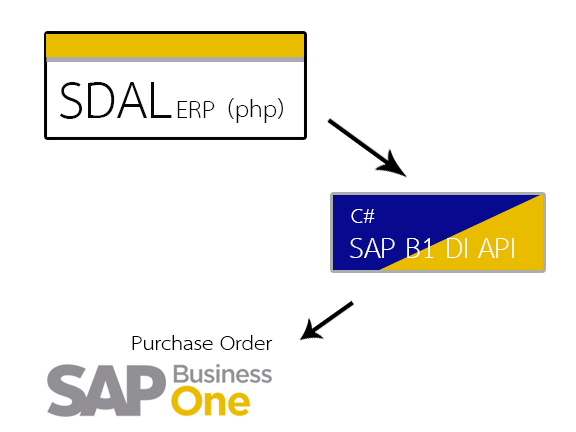
<style>
.page{position:relative;width:576px;height:432px;background:#ffffff}
.page>*{position:absolute;margin:0}
.t1{font:75.1px "THSarabunNew";color:#080807}
.t2{font:35.4px "THSarabunNew";color:#080807}
.t3{font:30px "THSarabunNew";color:#ffffff}
.t4{font:41.4px "THSarabunNew";color:#ffffff}
.t5{font:30.2px "THSarabunNew";color:#000000}
</style>
<div class="page">
<p class="t1" style="left:60px;top:82px;width:112px;height:37px">SDAL</p>
<p class="t2" style="left:177px;top:101px;width:38px;height:17px">ERP</p>
<p class="t2" style="left:228px;top:98px;width:55px;height:25px">(php)</p>
<p class="t3" style="left:351px;top:209px;width:24px;height:14px">C#</p>
<p class="t4" style="left:350px;top:238px;width:164px;height:20px">SAP B1 DI API</p>
<p class="t5" style="left:132px;top:335px;width:141px;height:15px">Purchase Order</p>
</div>
